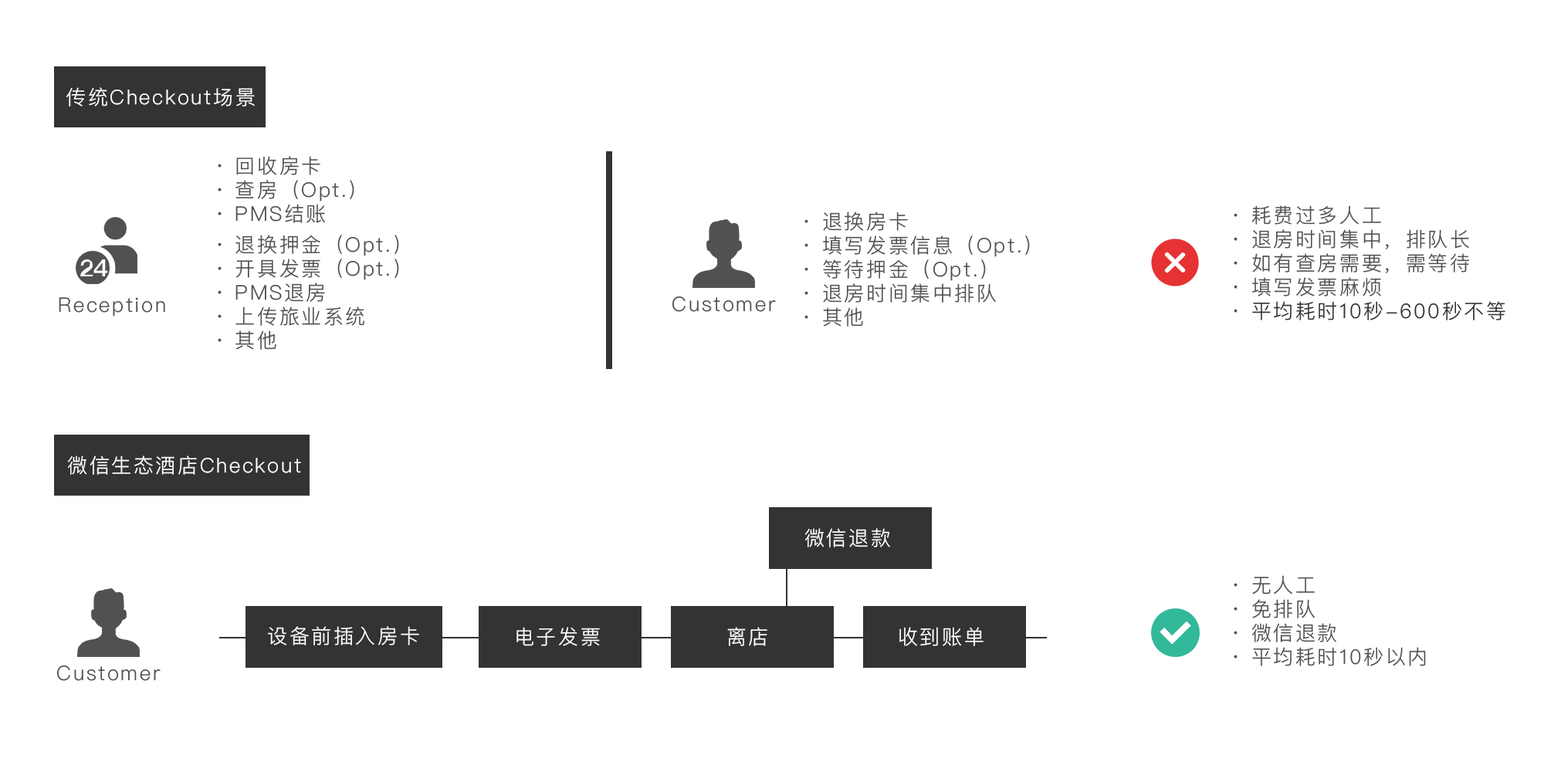
<style>
.page{position:relative;width:1544px;height:772px;background:#ffffff}
.page>*{position:absolute;margin:0}
.t1{font:20.1px "PingFangSC-Light";letter-spacing:0.1em;color:#ffffff}
.t2{font:20.1px/30.9px "PingFangSC-Light";letter-spacing:0.1em;color:#515151}
.t3{font:20.1px/30.9px "PingFangSC-Light";letter-spacing:0.1em;color:#333333}
.t4{font:20.1px "PingFangSC-Light";letter-spacing:0.1em;color:#515151}
</style>
<div class="page">
<p class="t1" style="left:66px;top:87px;width:189px;height:20px">传统Checkout场景</p>
<p class="t2" style="left:218px;top:156px;width:181px;height:194px">· 回收房卡<br>· 查房（Opt.）<br>· PMS结账<br>· 退换押金（Opt.）<br>· 开具发票（Opt.）<br>· PMS退房<br>· 上传旅业系统<br>· 其他</p>
<p class="t2" style="left:1234px;top:205px;width:272px;height:115px">· 耗费过多人工<br>· 退房时间集中，排队长<br>· 如有查房需要，需等待<br>· 填写发票麻烦<br>· <span class="t3">平均耗时10秒-600秒不等</span></p>
<p class="t2" style="left:805px;top:212px;width:225px;height:115px">· 退换房卡<br>· 填写发票信息（Opt.）<br>· 等待押金（Opt.）<br>· 退房时间集中排队<br>· 其他</p>
<p class="t4" style="left:59px;top:297px;width:106px;height:20px">Reception</p>
<p class="t4" style="left:673px;top:297px;width:103px;height:15px">Customer</p>
<p class="t1" style="left:67px;top:456px;width:234px;height:19px">微信生态酒店Checkout</p>
<p class="t1" style="left:805px;top:528px;width:85px;height:19px">微信退款</p>
<p class="t2" style="left:1234px;top:575px;width:192px;height:91px">· 无人工<br>· 免排队<br>· 微信退款<br>· 平均耗时10秒以内</p>
<p class="t1" style="left:268px;top:626px;width:151px;height:20px">设备前插入房卡</p>
<p class="t1" style="left:517px;top:627px;width:83px;height:19px">电子发票</p>
<p class="t1" style="left:727px;top:627px;width:41px;height:19px">离店</p>
<p class="t1" style="left:900px;top:627px;width:84px;height:19px">收到账单</p>
<p class="t4" style="left:57px;top:666px;width:104px;height:15px">Customer</p>
</div>
